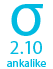
<style>
.page{position:relative;width:53px;height:69px;background:#ffffff}
.page>*{position:absolute;margin:0}
.t1{font:62.5px "MyriadPro-Regular";color:#00bae1}
.t2{font:18.8px "MyriadPro-Regular";color:#00bae1}
.t3{font:11.2px "MyriadPro-Regular";color:#00bae1}
</style>
<div class="page">
<p class="t1" style="left:11px;top:4px;width:32px;height:32px">σ</p>
<p class="t2" style="left:10px;top:41px;width:32px;height:13px">2.10</p>
<p class="t3" style="left:7px;top:59px;width:39px;height:8px">ankalike</p>
</div>
